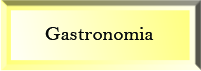
<style>
.page{position:relative;width:201px;height:71px}
.page>*{position:absolute;margin:0}
.t1{font:20.3px "BellMT";color:#060808}
</style>
<div class="page">
<p class="t1" style="left:45px;top:27px;width:109px;height:13px">Gastronomia</p>
</div>
